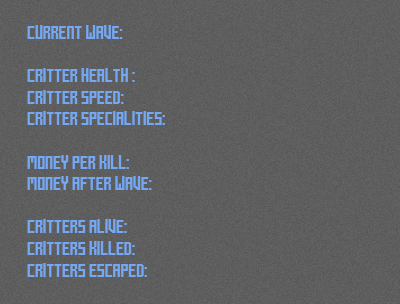
<style>
.page{position:relative;width:400px;height:304px}
.page>*{position:absolute;margin:0}
.t1{font:18px "Mecha-Bold";color:#75a8f3}
</style>
<div class="page">
<p class="t1" style="left:27px;top:25px;width:138px;height:252px">CURRENT WAVE:   <br><br>CRITTER HEALTH :   <br>CRITTER SPEED:    <br>CRITTER SPECIALITIES:  <br><br>MONEY PER KILL:    <br>MONEY AFTER WAVE:   <br><br>CRITTERS ALIVE:    <br>CRITTERS KILLED:   <br>CRITTERS ESCAPED:</p>
</div>
